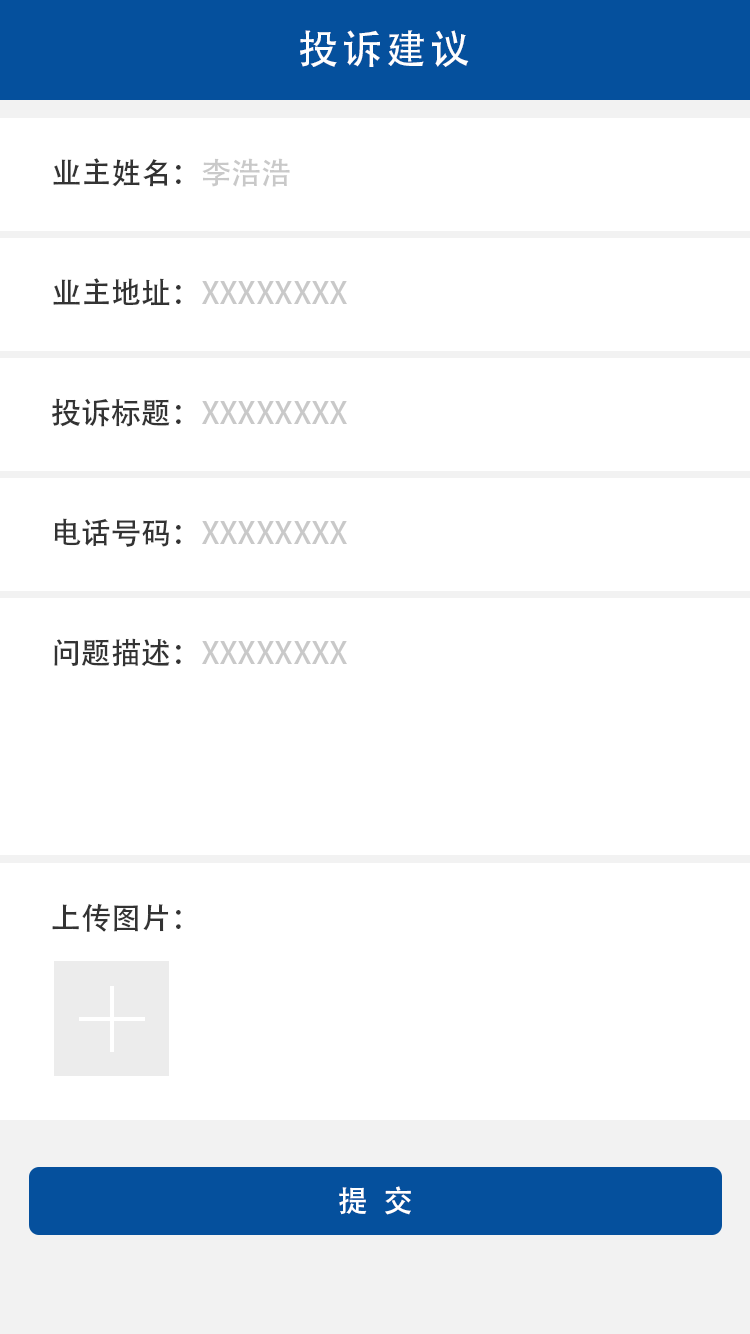
<style>
.page{position:relative;width:750px;height:1334px;background:#ffffff}
.page>*{position:absolute;margin:0}
.t1{font:40px "AdobeHeitiStd-Regular";letter-spacing:0.1em;color:#fefefe;text-transform:uppercase}
.t2{font:30px "AdobeHeitiStd-Regular";color:#333333;text-transform:uppercase}
.t3{font:30px "AdobeHeitiStd-Regular";color:#c9c9c9;text-transform:uppercase}
.t4{font:30px "AdobeHeitiStd-Regular";letter-spacing:0.5em;color:#ffffff;text-transform:uppercase}
</style>
<div class="page">
<p class="t1" style="left:300px;top:30px;width:169px;height:37px">投诉建议</p>
<p class="t2" style="left:53px;top:158px;width:237px;height:29px">业主姓名：<span class="t3">李浩浩</span></p>
<p class="t3" style="left:53px;top:278px;width:294px;height:28px"><span class="t2">业主地址：</span>XXXXXXXX</p>
<p class="t3" style="left:52px;top:398px;width:295px;height:29px"><span class="t2">投诉标题：</span>XXXXXXXX</p>
<p class="t3" style="left:54px;top:518px;width:293px;height:29px"><span class="t2">电话号码：</span>XXXXXXXX</p>
<p class="t3" style="left:54px;top:638px;width:293px;height:29px"><span class="t2">问题描述：</span>XXXXXXXX</p>
<p class="t2" style="left:52px;top:903px;width:129px;height:29px">上传图片：</p>
<p class="t4" style="left:339px;top:1186px;width:72px;height:29px">提交</p>
</div>
